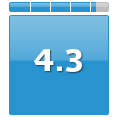
<style>
.page{position:relative;width:117px;height:117px;background:#2793cf}
.page>*{position:absolute;margin:0}
.t1{font:36px "Colaborate-Bold";color:#ffffff;text-transform:uppercase}
</style>
<div class="page">
<p class="t1" style="left:34px;top:49px;width:48px;height:23px">4.3</p>
</div>
